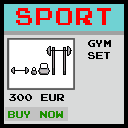
<style>
.page{position:relative;width:128px;height:128px;background:#d9dada}
.page>*{position:absolute;margin:0}
.t1{font:24px "JoystixMonospace-Regular";color:#ff0000}
.t2{font:10px "JoystixMonospace-Regular";color:#000000}
.t3{font:10px "JoystixMonospace-Regular";color:#1b9100}
</style>
<div class="page">
<p class="t1" style="left:16px;top:8px;width:95px;height:17px">SPORT</p>
<p class="t2" style="left:88px;top:40px;width:23px;height:19px">GYM<br>set</p>
<p class="t2" style="left:9px;top:94px;width:55px;height:7px">300 EUR</p>
<p class="t3" style="left:8px;top:111px;width:55px;height:7px">BUY NOW</p>
</div>
